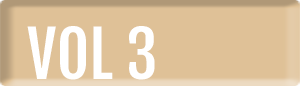
<style>
.page{position:relative;width:300px;height:86px;background:#dfc197}
.page>*{position:absolute;margin:0}
.t1{font:63px "FjallaOne-Regular";color:#ffffff;text-transform:uppercase}
</style>
<div class="page">
<p class="t1" style="left:27px;top:26px;width:128px;height:54px">VOL 3</p>
</div>
